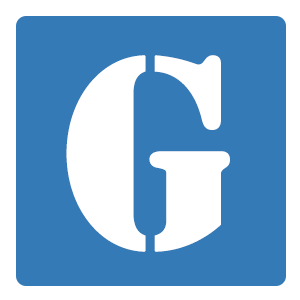
<style>
.page{position:relative;width:300px;height:300px;background:#337ab7}
.page>*{position:absolute;margin:0}
.t1{font:250px "StencilStd";color:#ffffff;font-weight:bold}
</style>
<div class="page">
<p class="t1" style="left:66px;top:55px;width:164px;height:197px">G</p>
</div>
